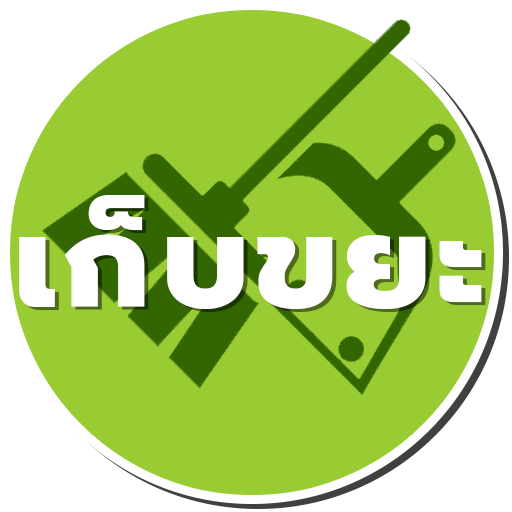
<style>
.page{position:relative;width:512px;height:512px;background:#99cc33}
.page>*{position:absolute;margin:0}
.t1{font:130.6px "Prompt-ExtraBold";letter-spacing:0.05em;color:#ffffff}
</style>
<div class="page">
<p class="t1" style="left:19px;top:195px;width:463px;height:114px">เก็บขยะ</p>
</div>
